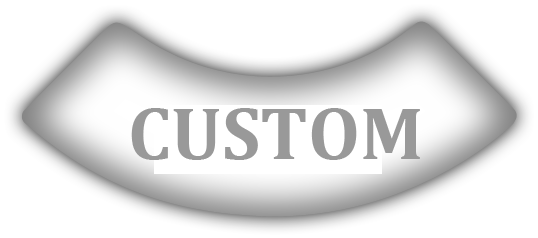
<style>
.page{position:relative;width:538px;height:238px;background:#ffffff}
.page>*{position:absolute;margin:0}
.t1{font:75px "Cambria-Bold";color:#999999}
</style>
<div class="page">
<p class="t1" style="left:131px;top:108px;width:289px;height:52px">CUSTOM</p>
</div>
